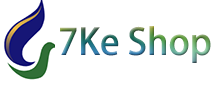
<style>
.page{position:relative;width:220px;height:85px;background:#ffffff}
.page>*{position:absolute;margin:0}
.t1{font:36px "AdobeHeitiStd-Regular"}
</style>
<div class="page">
<p class="t1" style="left:60px;top:26px;width:151px;height:37px">7Ke Shop</p>
</div>
